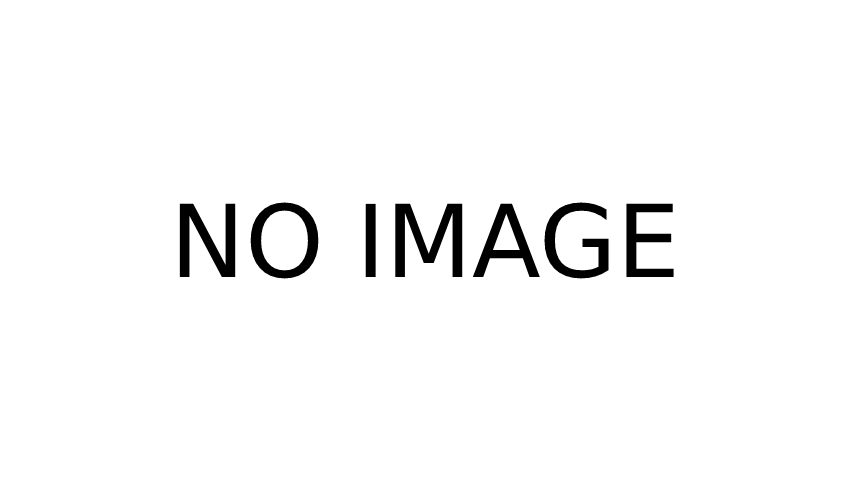
<style>
.page{position:relative;width:854px;height:480px;background:#ffffff}
.page>*{position:absolute;margin:0}
.t1{font:100.3px "DejaVuSans";color:#000000}
</style>
<div class="page">
<p class="t1" style="left:179px;top:202px;width:495px;height:77px">NO IMAGE</p>
</div>
